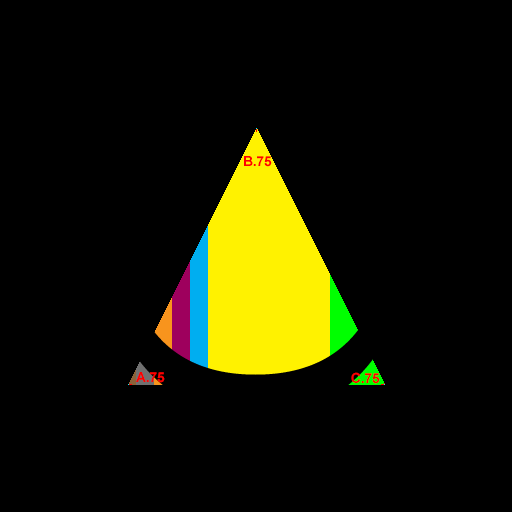
<style>
.page{position:relative;width:512px;height:512px;background:#000000}
.page>*{position:absolute;margin:0}
.t1{font:14px "Arial-BoldMT";letter-spacing:-0.02em;color:#ff0000}
</style>
<div class="page">
<p class="t1" style="left:244px;top:156px;width:28px;height:11px">B.75</p>
<p class="t1" style="left:136px;top:372px;width:29px;height:11px">A.75</p>
<p class="t1" style="left:351px;top:372px;width:29px;height:12px">C.75</p>
</div>
